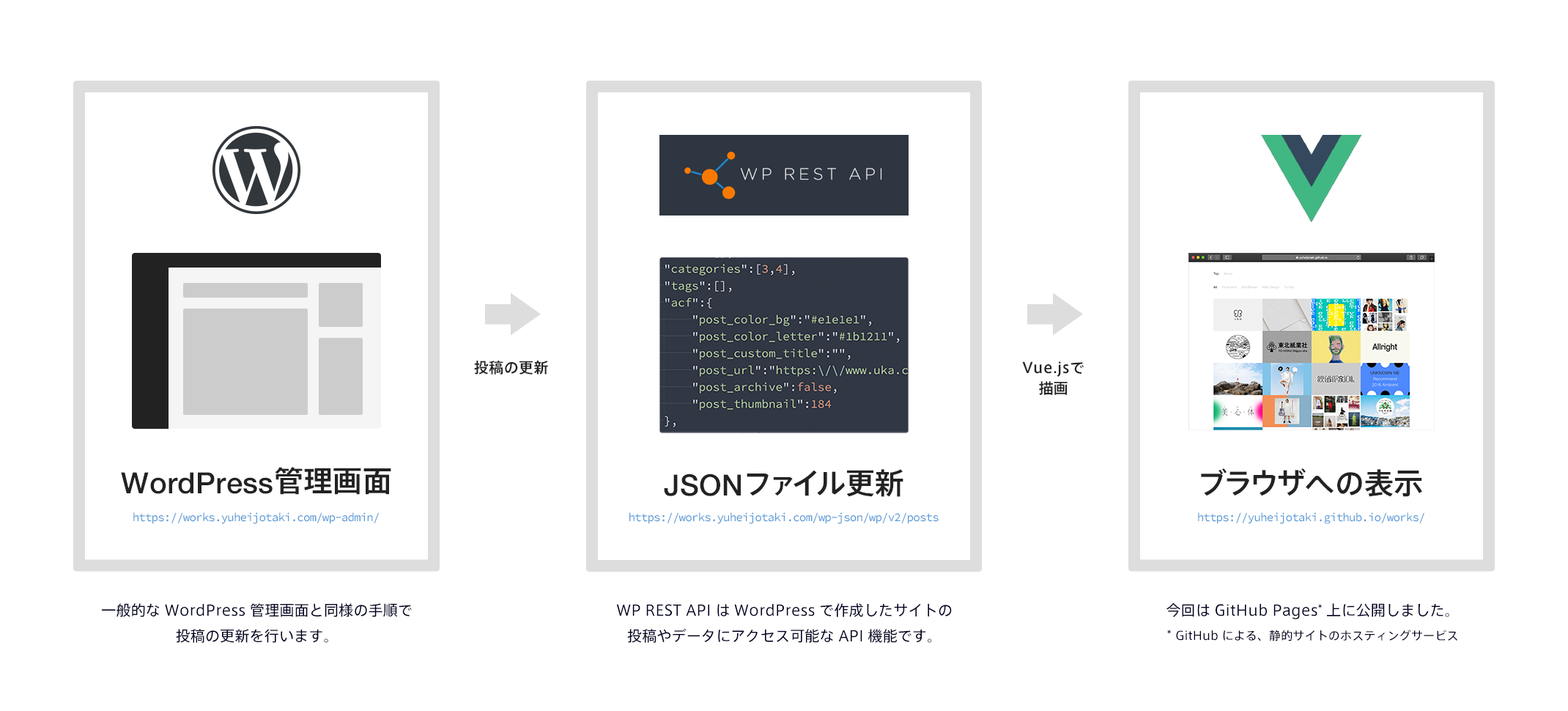
<style>
.page{position:relative;width:1568px;height:711px;background:#ffffff}
.page>*{position:absolute;margin:0}
.t1{font:14.7px "AxisStd-Medium";letter-spacing:0.02em;color:#222222}
.t2{font:14.7px/20.5px "AxisStd-Medium";letter-spacing:0.02em;color:#222222}
.t3{font:29.3px "HelveticaNeue-Medium";letter-spacing:0.01em;color:#222222}
.t4{font:29.3px "AxisStd-Medium";letter-spacing:0.01em;color:#222222}
.t5{font:11.7px "SourceCodePro-Regular";letter-spacing:-0.06em;color:#5799d6}
.t6{font:14.7px/25.6px "AxisStd-Regular";letter-spacing:0.01em;color:#000022}
.t7{font:11.7px/25.6px "AxisStd-Regular";letter-spacing:0.01em;color:#000022}
</style>
<div class="page">
<p class="t1" style="left:474px;top:360px;width:74px;height:14px">投稿の更新</p>
<p class="t2" style="left:1022px;top:361px;width:62px;height:34px;text-align:center">Vue.jsで<br>描画</p>
<p class="t3" style="left:121px;top:467px;width:270px;height:28px">WordPress<span class="t4">管理画面</span></p>
<p class="t4" style="left:664px;top:469px;width:239px;height:28px"><span class="t3">JSON</span>ファイル更新</p>
<p class="t4" style="left:1201px;top:467px;width:221px;height:30px">ブラウザへの表示</p>
<p class="t5" style="left:133px;top:512px;width:246px;height:12px">https://works.yuheijotaki.com/wp-admin/</p>
<p class="t5" style="left:629px;top:512px;width:310px;height:12px">https://works.yuheijotaki.com/wp-json/wp/v2/posts</p>
<p class="t5" style="left:1198px;top:512px;width:226px;height:12px">https://yuheijotaki.github.io/works/</p>
<p class="t6" style="left:102px;top:603px;width:310px;height:40px;text-align:center">一般的な WordPress 管理画面と同様の手順で<br>投稿の更新を行います。</p>
<p class="t6" style="left:616px;top:603px;width:336px;height:40px;text-align:center">WP REST API は WordPress で作成したサイトの<br>投稿やデータにアクセス可能な API 機能です。</p>
<p class="t6" style="left:1166px;top:603px;width:291px;height:38px;text-align:center">今回は GitHub Pages* 上に公開しました。<br>* <span class="t7">GitHub による、静的サイトのホスティングサービス</span></p>
</div>
